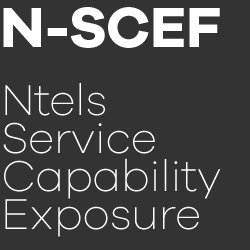
<style>
.page{position:relative;width:250px;height:250px;background:#333333}
.page>*{position:absolute;margin:0}
.t1{font:58.5px "GalanoGrotesque-Bold";letter-spacing:-0.01em;color:#ffffff}
.t2{font:44.5px/38px "GalanoGrotesque-ExtraLight";letter-spacing:-0.01em;color:#ffffff}
</style>
<div class="page">
<p class="t1" style="left:3px;top:7px;width:217px;height:41px">N-SCEF</p>
<p class="t2" style="left:3px;top:83px;width:218px;height:154px">Ntels<br>Service <br>Capability<br>Exposure</p>
</div>
